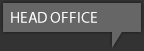
<style>
.page{position:relative;width:144px;height:51px;background:#666666}
.page>*{position:absolute;margin:0}
.t1{font:15.5px "YanoneKaffeesatz-Regular";color:#ffffff}
</style>
<div class="page">
<p class="t1" style="left:11px;top:12px;width:86px;height:11px">HEAD OFFICE</p>
</div>
